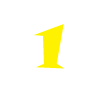
<style>
.page{position:relative;width:100px;height:100px;background:#ffffff}
.page>*{position:absolute;margin:0}
.t1{font:60px "SnapITC-Regular";color:#fff200}
</style>
<div class="page">
<p class="t1" style="left:34px;top:24px;width:30px;height:45px">1</p>
</div>
